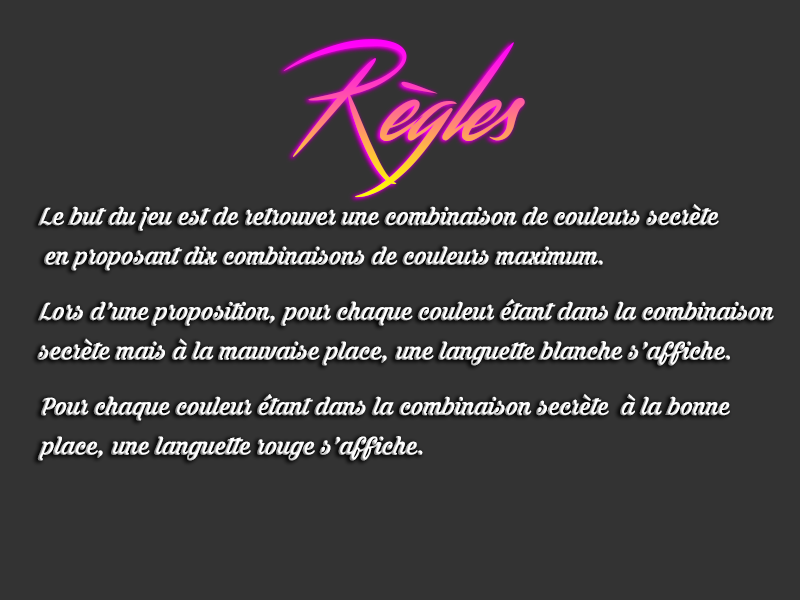
<style>
.page{position:relative;width:800px;height:600px;background:#333333}
.page>*{position:absolute;margin:0}
.t1{font:110px "Streamster"}
.t2{font:33px "KrinkesRegularPERSONALUSE"}
</style>
<div class="page">
<p class="t1" style="left:283px;top:39px;width:242px;height:159px">Règles</p>
<p class="t2" style="left:38px;top:204px;width:681px;height:67px">Le but du jeu est de retrouver une combinaison de couleurs secrète<br> en proposant dix combinaisons de couleurs maximum.</p>
<p class="t2" style="left:37px;top:299px;width:737px;height:67px">Lors d'une proposition, pour chaque couleur étant dans la combinaison<br>secrète mais à la mauvaise place, une languette blanche s'affiche.</p>
<p class="t2" style="left:37px;top:394px;width:693px;height:67px">Pour chaque couleur étant dans la combinaison secrète  à la bonne <br>place, une languette rouge s'affiche.</p>
</div>
